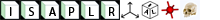
<style>
.page{position:relative;width:220px;height:20px;background:#ffffff}
.page>*{position:absolute;margin:0}
.t1{font:12px "MyriadPro-Regular";color:#000000}
</style>
<div class="page">
<p class="t1" style="left:10px;top:7px;width:2px;height:9px">I</p>
<p class="t1" style="left:28px;top:7px;width:6px;height:9px">S</p>
<p class="t1" style="left:49px;top:7px;width:7px;height:9px">A</p>
<p class="t1" style="left:69px;top:7px;width:6px;height:9px">P</p>
<p class="t1" style="left:89px;top:7px;width:5px;height:9px">L</p>
<p class="t1" style="left:109px;top:7px;width:6px;height:9px">R</p>
</div>
